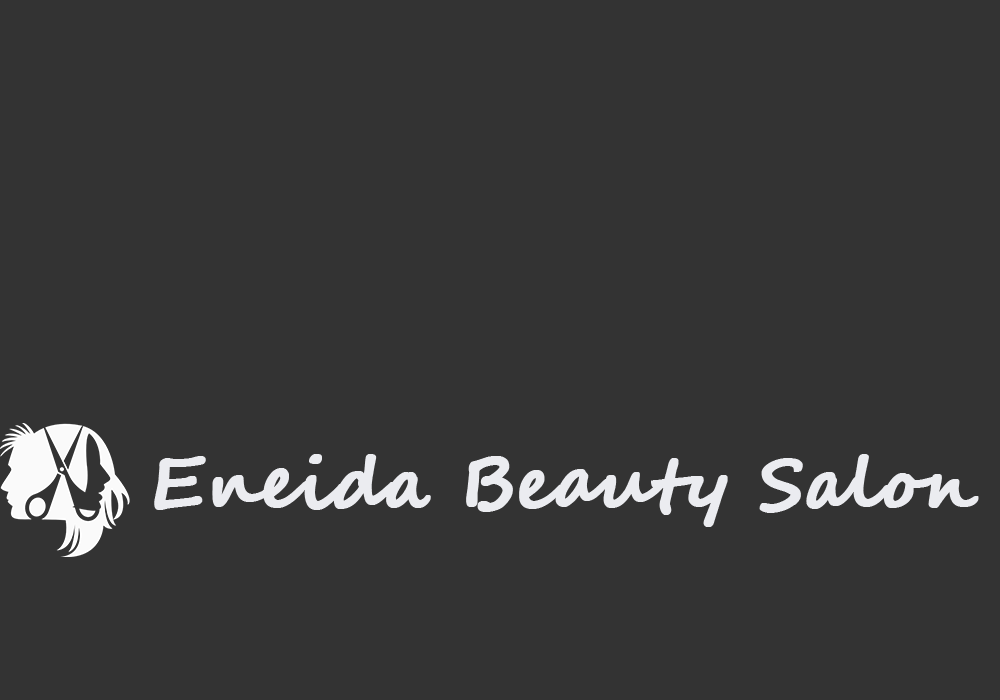
<style>
.page{position:relative;width:1000px;height:700px;background:#333333}
.page>*{position:absolute;margin:0}
.t1{font:70.8px "SegoeScript-Bold";letter-spacing:-0.005em;color:#ebecf0;font-weight:bold}
</style>
<div class="page">
<p class="t1" style="left:154px;top:454px;width:825px;height:73px">Eneida Beauty Salon</p>
</div>
